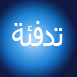
<style>
.page{position:relative;width:77px;height:77px}
.page>*{position:absolute;margin:0}
.t1{font:35.3px "MicrosoftSansSerif";color:#ffffff}
</style>
<div class="page">
<p class="t1" style="left:12px;top:21px;width:51px;height:25px">تدفئة</p>
</div>
